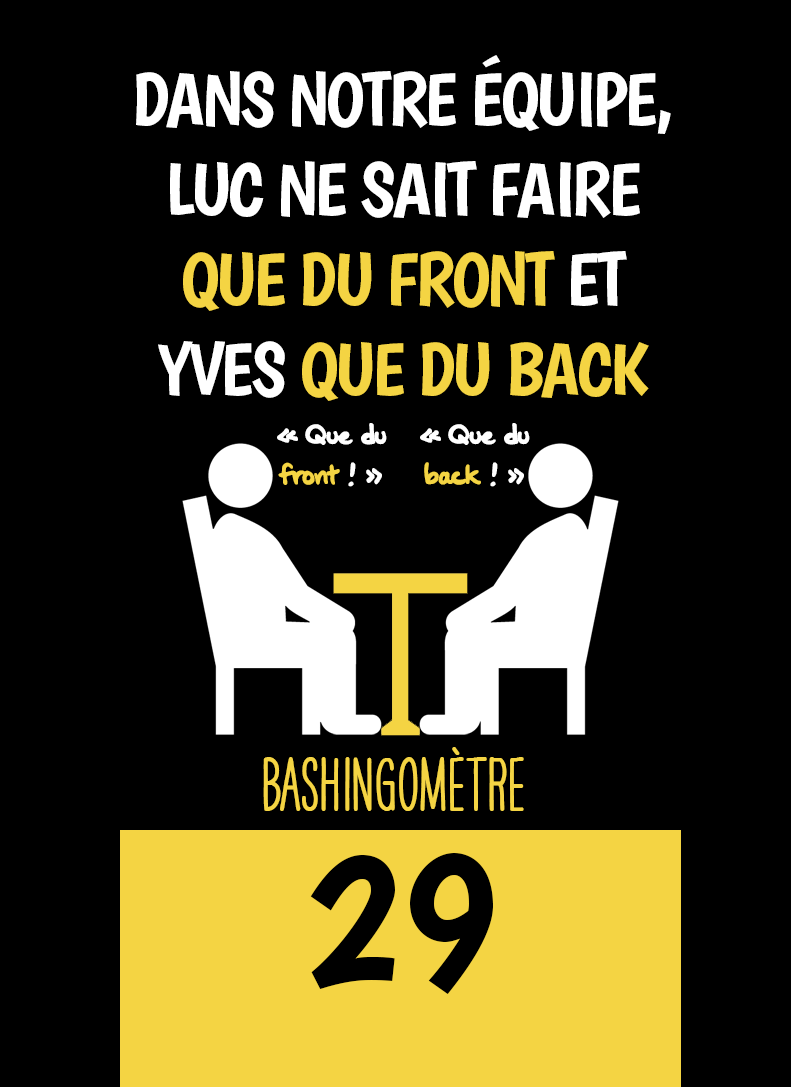
<style>
.page{position:relative;width:791px;height:1087px;background:#000000}
.page>*{position:absolute;margin:0}
.t1{font:75px "Boogaloo-Regular";letter-spacing:-0.04em;color:#ffffff}
.t2{font:75px "Boogaloo-Regular";letter-spacing:-0.04em;color:#f4d443}
.t3{font:33.3px "OakStreetW01-Regular";letter-spacing:-0.04em;color:#ffffff}
.t4{font:33.3px "OakStreetW01-Regular";letter-spacing:-0.04em;color:#f4d443}
.t5{font:66.7px "HAVEANICEDAYTallW04-Bold";color:#f4d443}
.t6{font:200px "Boogaloo-Regular";color:#000000}
</style>
<div class="page">
<p class="t1" style="left:136px;top:55px;width:535px;height:346px;text-align:center">DANS NOTRE ÉQUIPE, LUC NE SAIT FAIRE <span class="t2">QUE DU FRONT</span> ET YVES <span class="t2">QUE DU BACK</span></p>
<p class="t3" style="left:277px;top:423px;width:110px;height:64px;text-align:center">« Que du <span class="t4">front</span> ! »</p>
<p class="t3" style="left:420px;top:423px;width:110px;height:64px;text-align:center">« Que du <span class="t4">back </span>! »</p>
<p class="t5" style="left:263px;top:747px;width:261px;height:64px">BASHINgomètre</p>
<p class="t6" style="left:310px;top:853px;width:183px;height:141px">29</p>
</div>
